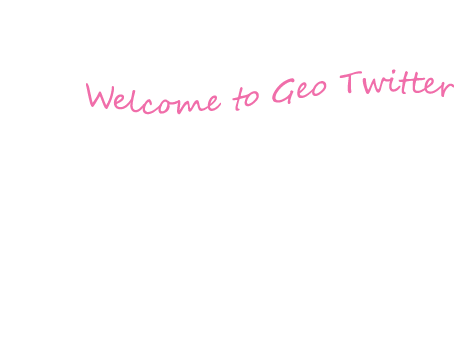
<style>
.page{position:relative;width:454px;height:340px;background:#ffffff}
.page>*{position:absolute;margin:0}
.t1{font:30px "SegoeScript";color:#f06eaa}
</style>
<div class="page">
<p class="t1" style="left:86px;top:69px;width:369px;height:46px">Welcome to Geo Twitter</p>
</div>
